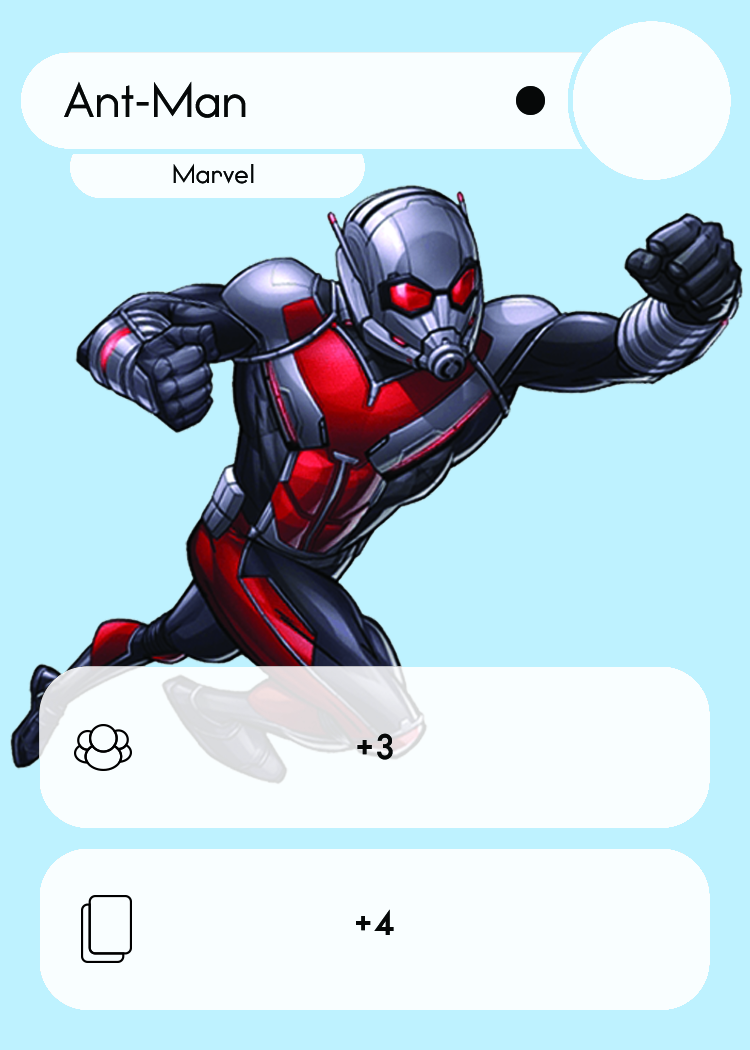
<style>
.page{position:relative;width:750px;height:1050px;background:#bef2ff}
.page>*{position:absolute;margin:0}
.t1{font:46.7px "WatchwordRegularDemo";color:#060808}
.t2{font:25.5px "WatchwordRegularDemo";color:#060808}
.t3{font:33.3px "WatchwordBoldDemo";color:#060808}
</style>
<div class="page">
<p class="t1" style="left:64px;top:81px;width:182px;height:37px">Ant-Man</p>
<p class="t2" style="left:173px;top:163px;width:81px;height:21px">Marvel</p>
<p class="t3" style="left:357px;top:733px;width:36px;height:27px">+3</p>
<p class="t3" style="left:356px;top:909px;width:38px;height:26px">+4</p>
</div>
